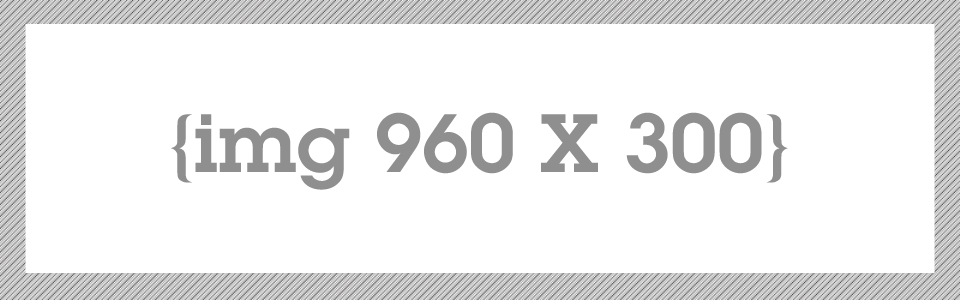
<style>
.page{position:relative;width:960px;height:300px;background:#ffffff}
.page>*{position:absolute;margin:0}
.t1{font:80.7px "LubalinGraphStd-Demi";color:#8f8f8f}
</style>
<div class="page">
<p class="t1" style="left:171px;top:112px;width:617px;height:78px">{img 960 X 300}</p>
</div>
